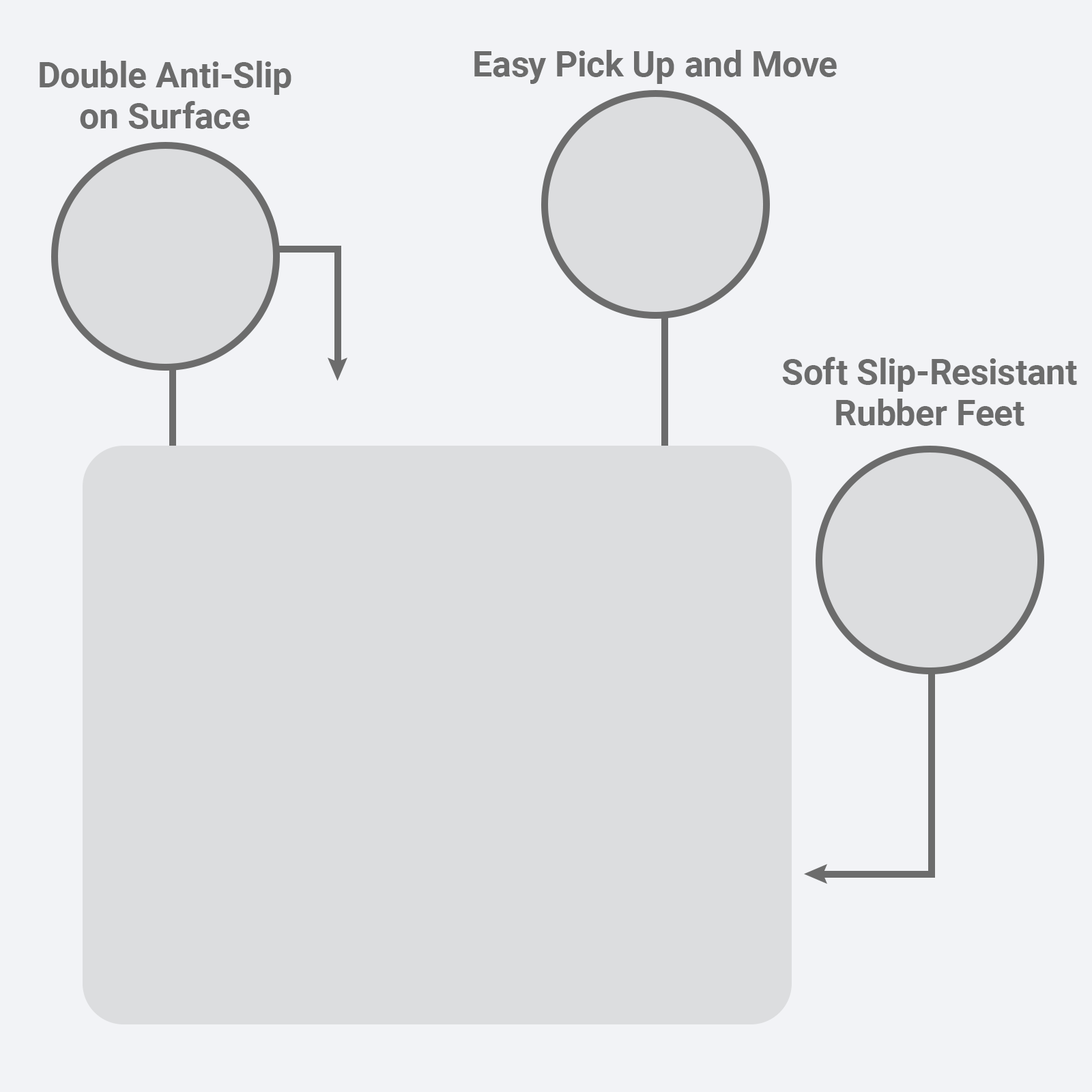
<style>
.page{position:relative;width:1092px;height:1092px;background:#f2f3f6}
.page>*{position:absolute;margin:0}
.t1{font:35.5px "Roboto-Bold";color:#6c6c6c}
.t2{font:35.5px/40.9px "Roboto-Bold";color:#6c6c6c}
</style>
<div class="page">
<p class="t1" style="left:474px;top:50px;width:363px;height:34px">Easy Pick Up and Move</p>
<p class="t2" style="left:40px;top:61px;width:251px;height:68px;text-align:center">Double Anti-Slip<br>on Surface</p>
<p class="t2" style="left:782px;top:357px;width:295px;height:69px;text-align:center">Soft Slip-Resistant<br>Rubber Feet</p>
</div>
